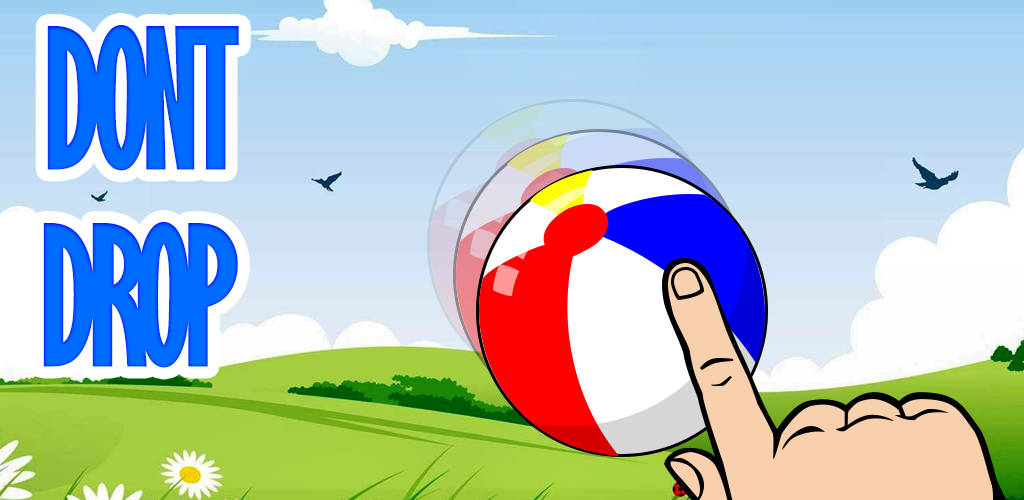
<style>
.page{position:relative;width:1024px;height:500px}
.page>*{position:absolute;margin:0}
.t1{font:180px "GillSansMT-ExtraCondensedBold";letter-spacing:-0.05em;color:#006cff}
</style>
<div class="page">
<p class="t1" style="left:47px;top:25px;width:192px;height:146px">DONT</p>
<p class="t1" style="left:43px;top:222px;width:195px;height:146px">DROP</p>
</div>
